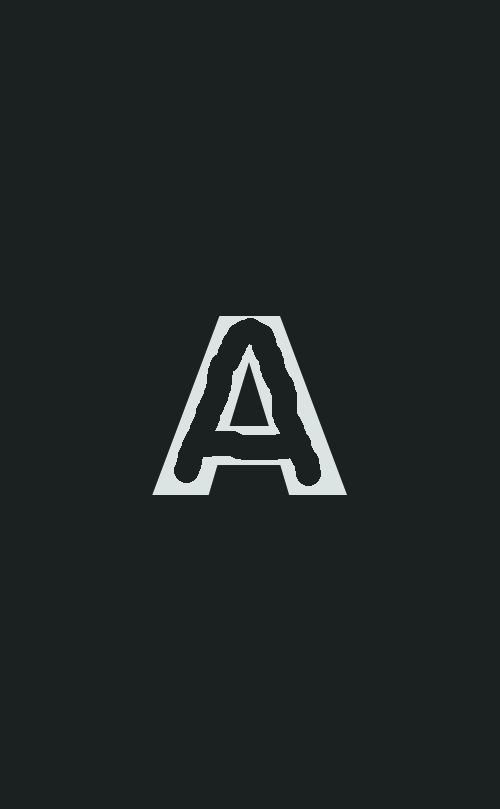
<style>
.page{position:relative;width:500px;height:809px;background:#1b2021}
.page>*{position:absolute;margin:0}
.t1{font:250px "Arial-Black";letter-spacing:0.075em}
</style>
<div class="page">
<p class="t1" style="left:152px;top:316px;width:196px;height:179px">A</p>
</div>
